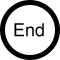
<style>
.page{position:relative;width:60px;height:60px;background:#ffffff}
.page>*{position:absolute;margin:0}
.t1{font:18px "ArialMT";color:#000000}
</style>
<div class="page">
<p class="t1" style="left:14px;top:23px;width:30px;height:14px">End</p>
</div>
